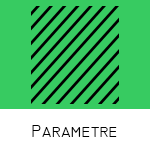
<style>
.page{position:relative;width:150px;height:150px;background:#37cb61}
.page>*{position:absolute;margin:0}
.t1{font:18px "Technic";color:#000000}
</style>
<div class="page">
<p class="t1" style="left:32px;top:125px;width:85px;height:12px">Parametre</p>
</div>
